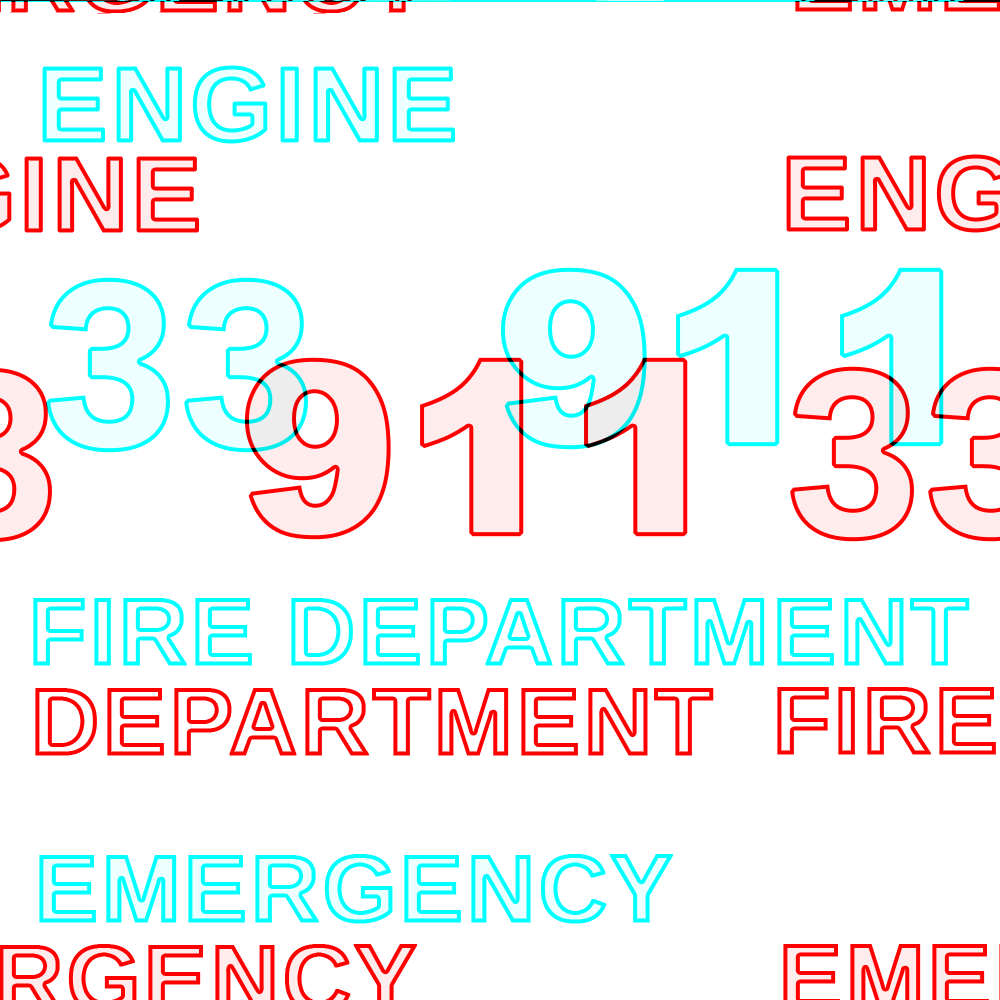
<style>
.page{position:relative;width:1000px;height:1000px;background:#ffffff}
.page>*{position:absolute;margin:0}
.t1{font:106px "Arimo-Bold";font-weight:bold}
.t2{font:96px "Arimo-Bold";font-weight:bold}
</style>
<div class="page">
<p class="t1" style="left:42px;top:63px;width:413px;height:79px">ENGINE</p>
<p class="t2" style="left:33px;top:596px;width:937px;height:68px">FIRE DEPARTMENT</p>
<p class="t2" style="left:39px;top:852px;width:634px;height:70px">EMERGENCY</p>
</div>
